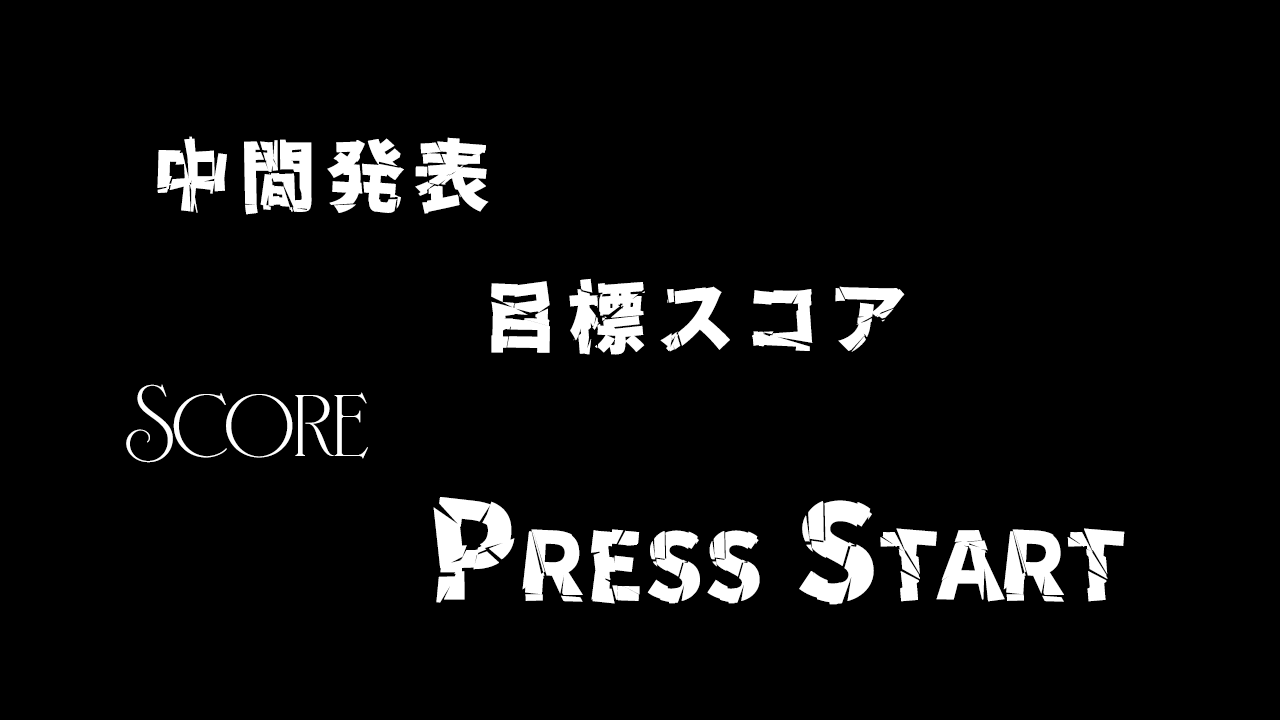
<style>
.page{position:relative;width:1280px;height:720px;background:#000000}
.page>*{position:absolute;margin:0}
.t1{font:77.8px "ZeroGothic";letter-spacing:0.115em;color:#ffffff}
.t2{font:133.3px "Fleur-Bold";color:#ffffff}
.t3{font:133.3px "ZeroGothic";color:#ffffff;font-variant:small-caps}
</style>
<div class="page">
<p class="t1" style="left:157px;top:136px;width:332px;height:79px">中間発表</p>
<p class="t1" style="left:491px;top:278px;width:414px;height:77px">目標スコア</p>
<p class="t2" style="left:126px;top:384px;width:242px;height:79px">Score</p>
<p class="t3" style="left:433px;top:497px;width:692px;height:108px">Press Start</p>
</div>
